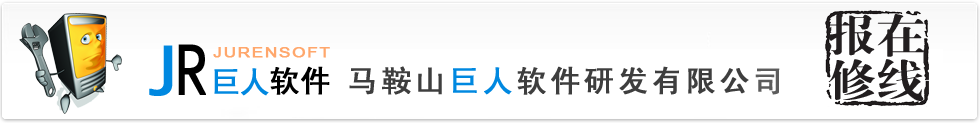
<style>
.page{position:relative;width:980px;height:123px;background:#ffffff}
.page>*{position:absolute;margin:0}
.t1{font:45.1px/45.5px "FZDBSJW--GB1-0";letter-spacing:-0.01em;color:#221e1f;scale:1.09 1}
.t2{font:74.3px "Corbel";letter-spacing:0.1em;color:#0088e0;font-weight:bold;scale:1.05 1}
.t3{font:75.9px "Corbel";letter-spacing:0.1em;color:#000000;font-weight:bold;scale:0.75 1}
.t4{font:14px "ArialMT";letter-spacing:0.1em;color:#ffa76c;font-weight:bold;scale:1.18 1}
.t5{font:30px "SimHei";letter-spacing:0.1em;color:#0088e0;font-weight:bold}
.t6{font:30px "SimHei";letter-spacing:0.1em;color:#000000;font-weight:bold}
.t7{font:30px "SimHei";letter-spacing:0.1em;color:#3e3e3e;font-weight:bold}
.t8{font:30px "SimHei";letter-spacing:0.1em;color:#5c5c5c;font-weight:bold}
</style>
<div class="page">
<p class="t1" style="left:828px;top:14px;width:96px;height:87px">在线<br>报修</p>
<p class="t2" style="left:149px;top:45px;width:24px;height:51px">J</p>
<p class="t3" style="left:178px;top:44px;width:28px;height:51px">R</p>
<p class="t4" style="left:213px;top:47px;width:117px;height:11px">JURENSOFT</p>
<p class="t5" style="left:214px;top:69px;width:25px;height:25px">巨</p>
<p class="t5" style="left:241px;top:68px;width:28px;height:28px">人</p>
<p class="t6" style="left:270px;top:67px;width:29px;height:28px">软</p>
<p class="t6" style="left:301px;top:66px;width:29px;height:29px">件</p>
<p class="t7" style="left:349px;top:66px;width:431px;height:29px">马鞍山<span class="t5">巨人</span>软件研发有限公<span class="t8">司</span></p>
</div>
